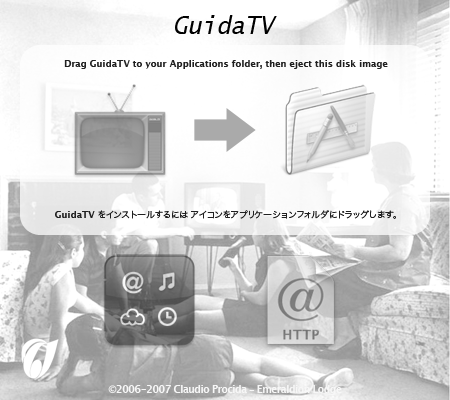
<style>
.page{position:relative;width:450px;height:400px}
.page>*{position:absolute;margin:0}
.t1{font:24px "LucidaSans-TypewriterOblique";color:#000000}
.t2{font:9px "LucidaGrande-Bold";letter-spacing:0.01em;color:#202020}
.t3{font:9px "HiraKakuPro-W3";letter-spacing:0.01em;color:#202020}
.t4{font:10px "LucidaGrande-Bold";letter-spacing:-0.05em;color:#f7f7f7}
</style>
<div class="page">
<p class="t1" style="left:175px;top:15px;width:102px;height:19px">GuidaTV</p>
<p class="t2" style="left:64px;top:60px;width:324px;height:9px">Drag GuidaTV to your Applications folder, then eject this disk image</p>
<p class="t3" style="left:55px;top:210px;width:341px;height:9px"><span class="t2">GuidaTV </span>をインストールするには アイコンをアプリケーションフォルダにドラッグします。</p>
<p class="t4" style="left:108px;top:385px;width:234px;height:10px">©2006-2007 Claudio Procida – Emeraldion Lodge</p>
</div>
